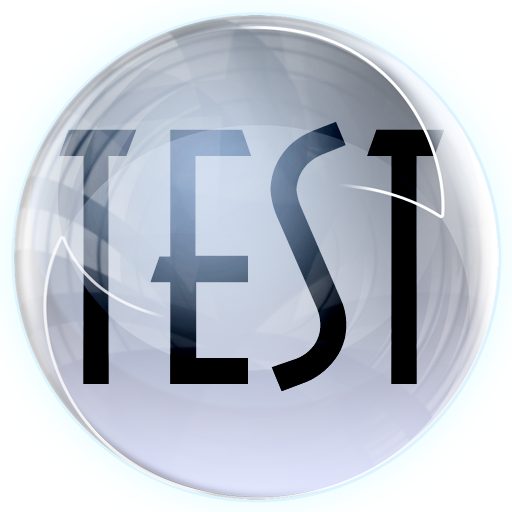
<style>
.page{position:relative;width:512px;height:512px}
.page>*{position:absolute;margin:0}
.t1{font:330px "Arcitectura"}
</style>
<div class="page">
<p class="t1" style="left:59px;top:121px;width:386px;height:270px">TEST</p>
<p class="t1" style="left:59px;top:121px;width:386px;height:270px">TEST</p>
</div>
